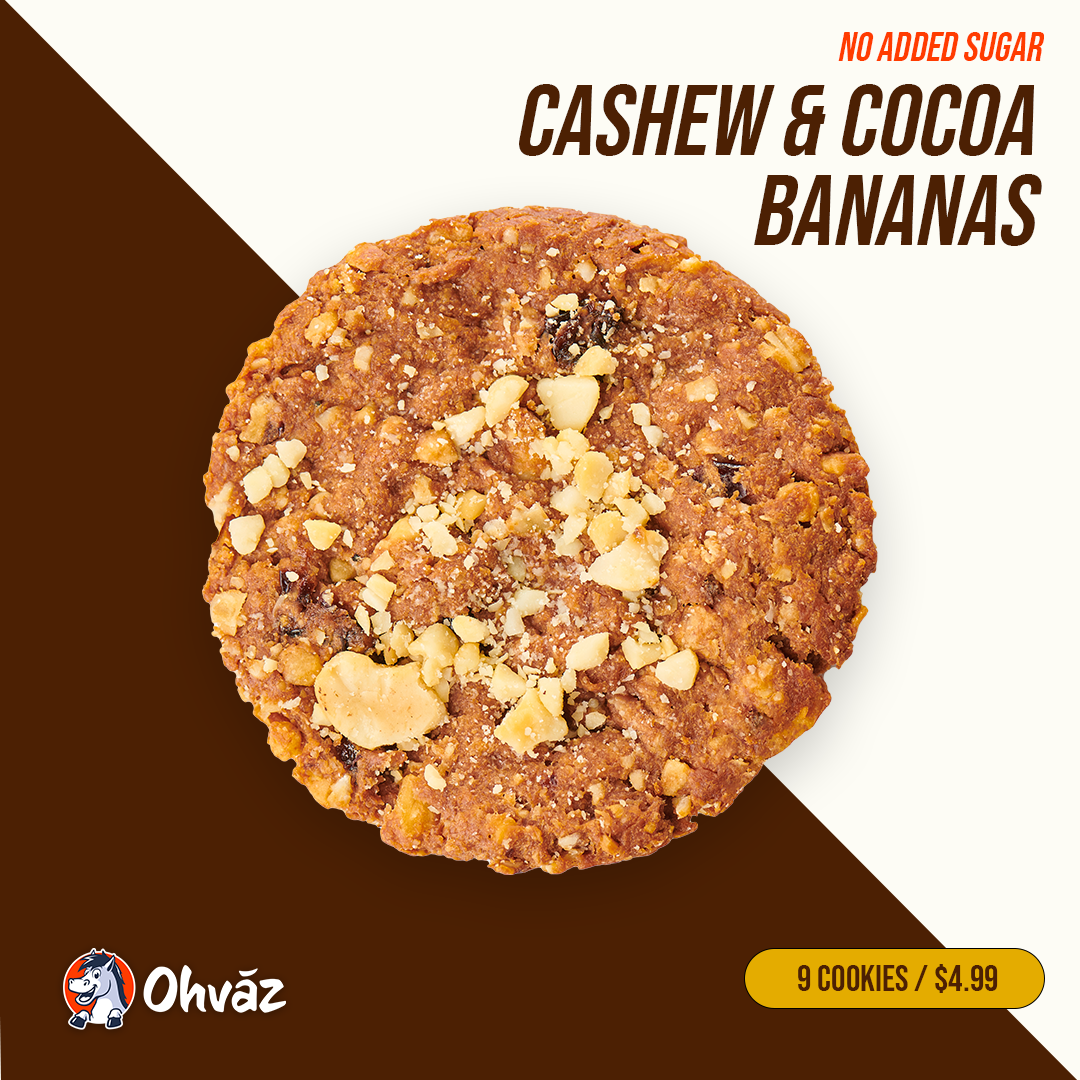
<style>
.page{position:relative;width:1080px;height:1080px;background:#4c2003}
.page>*{position:absolute;margin:0}
.t1{font:40px "BebasNeue-Regular";color:#ff3c00;font-style:italic}
.t2{font:100px/90px "BebasNeue-Regular";color:#4c2003;font-style:italic}
.t3{font:36px "BebasNeue-Regular";color:#4c2003}
</style>
<div class="page">
<p class="t1" style="left:838px;top:32px;width:206px;height:29px">No added sugar</p>
<p class="t2" style="left:519px;top:84px;width:523px;height:162px;text-align:right">Cashew &amp; Cocoa<br>Bananas</p>
<p class="t3" style="left:798px;top:964px;width:200px;height:29px">9 cookies / $4.99</p>
</div>
